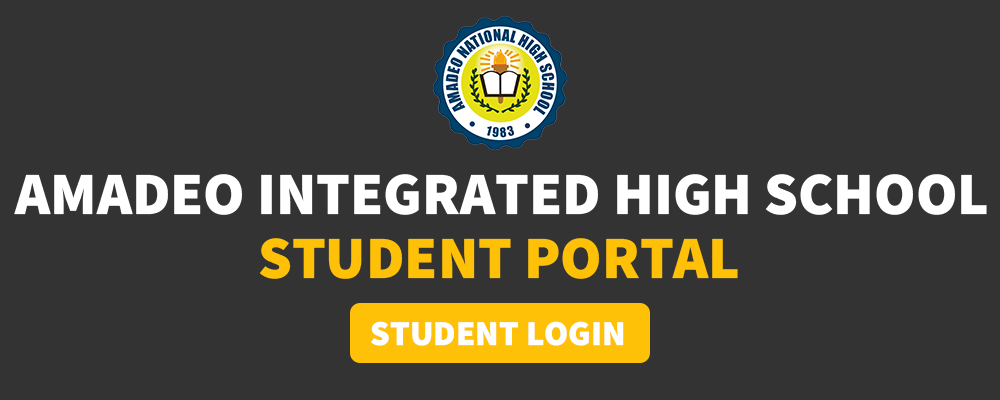
<style>
.page{position:relative;width:1000px;height:400px;background:#333333}
.page>*{position:absolute;margin:0}
.t1{font:60px "SourceSansRoman-Black";color:#ffffff}
.t2{font:60px "SourceSansRoman-Black";color:#ffc107}
.t3{font:35px "SourceSansRoman-Black";color:#ffffff}
</style>
<div class="page">
<p class="t1" style="left:14px;top:174px;width:973px;height:41px">AMADEO INTEGRATED HIGH SCHOOL</p>
<p class="t2" style="left:259px;top:238px;width:479px;height:41px">STUDENT PORTAL</p>
<p class="t3" style="left:371px;top:321px;width:253px;height:25px">STUDENT LOGIN</p>
</div>
